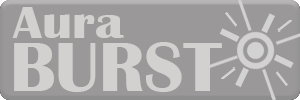
<style>
.page{position:relative;width:300px;height:100px;background:#9a9898}
.page>*{position:absolute;margin:0}
.t1{font:46.1px "BritannicBold";color:#d3d0d0;scale:1.15 1}
.t2{font:72px "BritannicBold";color:#d3d0d0}
</style>
<div class="page">
<p class="t1" style="left:12px;top:7px;width:112px;height:31px">Aura</p>
<p class="t2" style="left:14px;top:42px;width:208px;height:50px">BURST</p>
</div>
